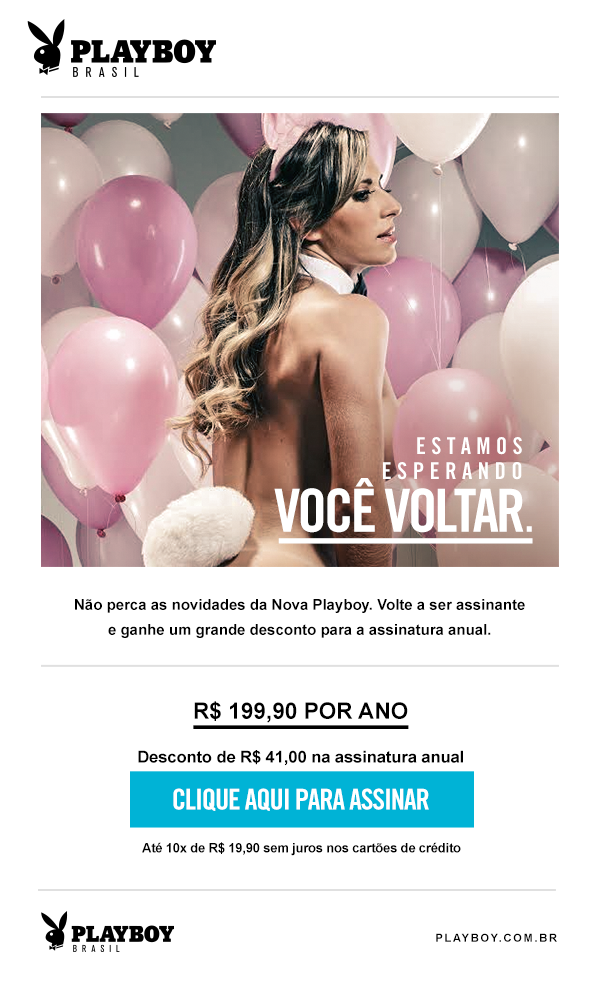
<style>
.page{position:relative;width:603px;height:988px;background:#ffffff}
.page>*{position:absolute;margin:0}
.t1{font:23.1px/24.8px "TradeGothicLTStd-BdCn20";letter-spacing:0.23em;color:#ffffff;text-transform:uppercase}
.t2{font:59.5px "TradeGothicLTStd-BdCn20";letter-spacing:-0.05em;color:#ffffff;text-transform:uppercase}
.t3{font:59.5px "TradeGothicLTStd-Cn18";letter-spacing:-0.05em;color:#ffffff;text-transform:uppercase}
.t4{font:70.6px "TradeGothicLTStd-BdCn20";color:#ffffff;text-transform:uppercase;scale:3.59 1}
.t5{font:15px/25px "Arial-BoldMT";color:#000000}
.t6{font:16.4px/18.7px "Arial-BoldMT";color:#000000}
.t7{font:22.6px/18.7px "Arial-BoldMT";color:#000000}
.t8{font:47.4px "TradeGothicLTStd-BdCn20";color:#000000;text-transform:uppercase;scale:4.54 1}
.t9{font:28.6px "TradeGothicLTStd-BdCn20";letter-spacing:-0.04em;color:#ffffff;text-transform:uppercase}
.t10{font:13.2px "Arial-BoldMT";letter-spacing:-0.02em;color:#000000}
.t11{font:11px "Arial-BoldMT";letter-spacing:0.16em;color:#000000;text-transform:uppercase}
</style>
<div class="page">
<p class="t1" style="left:383px;top:437px;width:139px;height:43px;text-align:right">Estamos<br>esperando</p>
<p class="t2" style="left:274px;top:478px;width:258px;height:55px">Você voltar<span class="t3">.</span></p>
<p class="t4" style="left:278px;top:538px;width:255px;height:6px">—</p>
<p class="t5" style="left:75px;top:599px;width:450px;height:39px;text-align:center">Não perca as novidades da Nova Playboy. Volte a ser assinante<br>e ganhe um grande desconto para a assinatura anual.</p>
<p class="t6" style="left:138px;top:701px;width:325px;height:65px;text-align:center"><span class="t7">R$ 199,90 POR ANO<br><br><br></span>Desconto de R$ 41,00 na assinatura anual</p>
<p class="t8" style="left:193px;top:725px;width:216px;height:4px">—</p>
<p class="t9" style="left:173px;top:788px;width:256px;height:23px">clique aqui para assinar</p>
<p class="t10" style="left:142px;top:842px;width:319px;height:14px">Até 10x de R$ 19,90 sem juros nos cartões de crédito</p>
<p class="t11" style="left:436px;top:933px;width:121px;height:9px">playboy.com.br</p>
</div>
